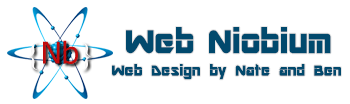
<style>
.page{position:relative;width:350px;height:104px;background:#ffffff}
.page>*{position:absolute;margin:0}
.t1{font:36px "ARDESTINE";color:#01496d}
.t2{font:16px "ARDESTINE";color:#01496d}
</style>
<div class="page">
<p class="t1" style="left:126px;top:27px;width:68px;height:27px">Web</p>
<p class="t1" style="left:209px;top:27px;width:122px;height:27px">Niobium</p>
<p class="t2" style="left:112px;top:64px;width:229px;height:16px">Web Design by Nate and Ben</p>
</div>
